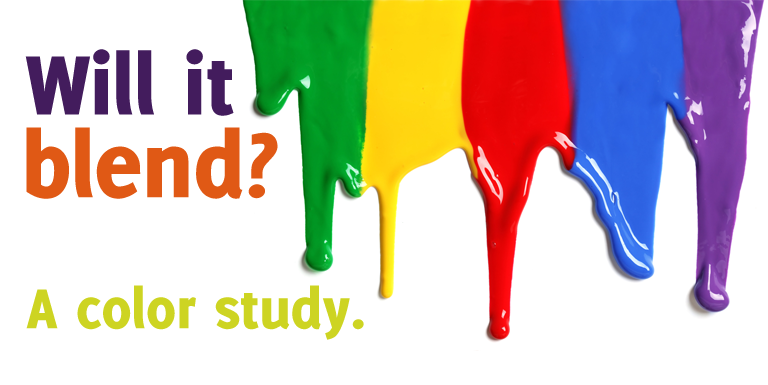
<style>
.page{position:relative;width:768px;height:385px;background:#ffffff}
.page>*{position:absolute;margin:0}
.t1{font:92.4px "Delicious-Heavy";color:#431c5d}
.t2{font:100.1px "Delicious-Heavy";color:#e05915}
.t3{font:92.4px "Delicious-Heavy";color:#e05915}
.t4{font:61.6px "Delicious-Heavy";color:#cdd422}
</style>
<div class="page">
<p class="t1" style="left:25px;top:49px;width:209px;height:67px">Will it</p>
<p class="t2" style="left:26px;top:127px;width:252px;height:72px">blend<span class="t3">?</span></p>
<p class="t4" style="left:26px;top:285px;width:338px;height:55px">A color study.</p>
</div>
